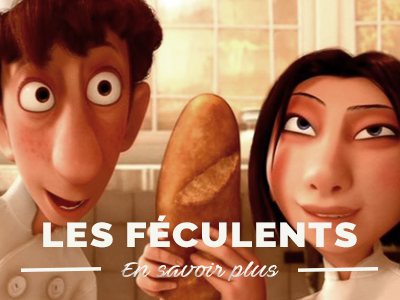
<style>
.page{position:relative;width:400px;height:300px}
.page>*{position:absolute;margin:0}
.t1{font:34.5px "Raleway-Black";letter-spacing:0.04em;color:#f5f6f0;scale:1.11 1}
.t2{font:20.7px "AveBetwanPERSONALUSEONLY";letter-spacing:0.04em;color:#f5f6f0;scale:1.11 1}
</style>
<div class="page">
<p class="t1" style="left:43px;top:215px;width:314px;height:33px">LES FÉCULENTS</p>
<p class="t2" style="left:121px;top:261px;width:158px;height:20px">En savoir plus</p>
</div>
